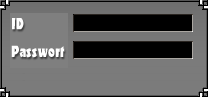
<style>
.page{position:relative;width:208px;height:97px;background:#7b7b7b}
.page>*{position:absolute;margin:0}
.t1{font:14px "Rumpus";color:#ffffff}
</style>
<div class="page">
<p class="t1" style="left:12px;top:18px;width:12px;height:12px">ID</p>
<p class="t1" style="left:11px;top:45px;width:54px;height:13px">Passwort</p>
</div>
